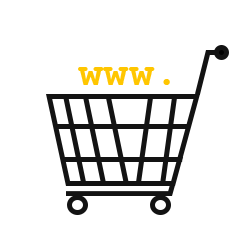
<style>
.page{position:relative;width:250px;height:250px;background:#ffffff}
.page>*{position:absolute;margin:0}
.t1{font:41.7px "CourierNewPS-BoldMT";color:#ffc600}
</style>
<div class="page">
<p class="t1" style="left:78px;top:67px;width:92px;height:18px">www.</p>
</div>
